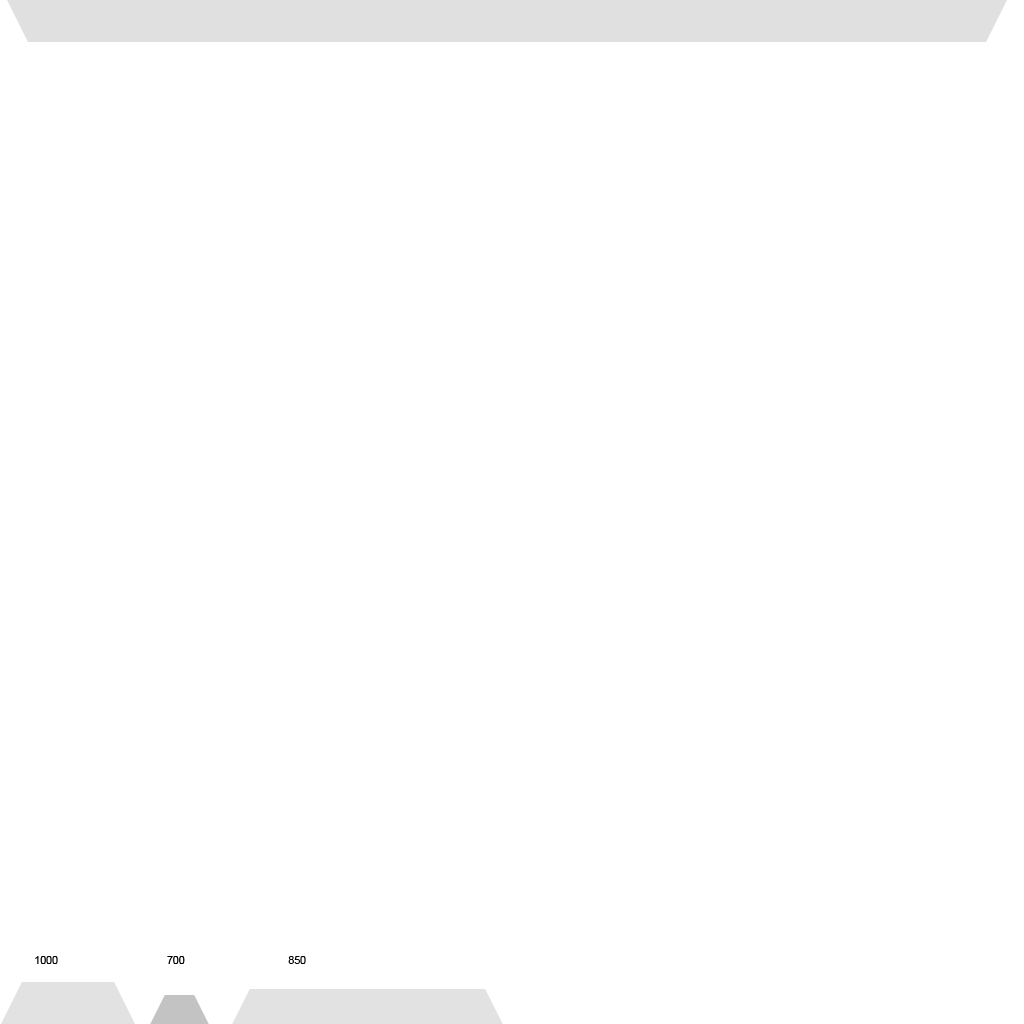
<style>
.page{position:relative;width:1024px;height:1024px;background:#ffffff}
.page>*{position:absolute;margin:0}
.t1{font:10.6px "ArialMT";color:#000000}
</style>
<div class="page">
<p class="t1" style="left:35px;top:956px;width:23px;height:8px">1000</p>
<p class="t1" style="left:167px;top:956px;width:18px;height:8px">700</p>
<p class="t1" style="left:288px;top:956px;width:18px;height:8px">850</p>
</div>
